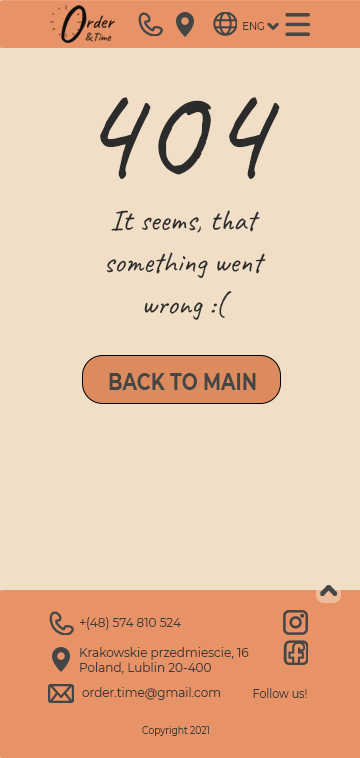
<style>
.page{position:relative;width:360px;height:758px;background:#f0dec6}
.page>*{position:absolute;margin:0}
.t1{font:10px "Montserrat-Regular";color:#3e3b3b}
.t2{font:144px "Caveat-Regular";color:#2b2b2b}
.t3{font:30px/42px "Caveat-Regular";color:#2b2b2b}
.t4{font:23.9px "Montserrat-Bold";color:#444545;scale:0.79 1}
.t5{font:12px "Montserrat-Regular";color:#3e3b3b}
.t6{font:12px "Montserrat-Regular";color:#3e3b3b;scale:0.92 1}
.t7{font:10px "Montserrat-Regular";color:#3e3b3b;scale:0.92 1}
</style>
<div class="page">
<p class="t1" style="left:243px;top:22px;width:21px;height:8px">ENG</p>
<p class="t2" style="left:100px;top:97px;width:180px;height:82px">404</p>
<p class="t3" style="left:106px;top:210px;width:160px;height:110px;text-align:center">It seems, that<br>something went<br>wrong :(</p>
<p class="t4" style="left:109px;top:373px;width:147px;height:17px">BACK TO MAIN</p>
<p class="t5" style="left:80px;top:617px;width:101px;height:13px">+(48) 574 810 524</p>
<p class="t5" style="left:80px;top:647px;width:169px;height:27px;text-align:justify">Krakowskie przedmiescie, 16<br>Poland, Lublin 20-400</p>
<p class="t5" style="left:82px;top:687px;width:138px;height:13px">order.time@gmail.com</p>
<p class="t6" style="left:253px;top:688px;width:54px;height:10px">Follow us!</p>
<p class="t7" style="left:142px;top:726px;width:67px;height:10px">Copyright 2021</p>
</div>
